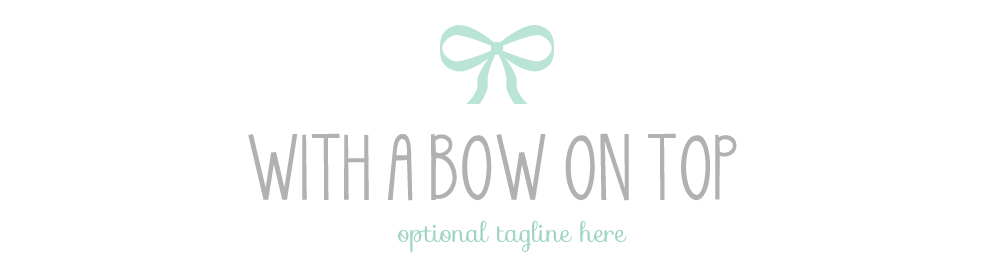
<style>
.page{position:relative;width:1000px;height:271px;background:#ffffff}
.page>*{position:absolute;margin:0}
.t1{font:74.8px "KGSkinnyLatte";color:#b2b1b1;text-transform:uppercase}
.t2{font:26.4px "Sofia-Regular";color:#a0d5c3}
</style>
<div class="page">
<p class="t1" style="left:248px;top:133px;width:489px;height:68px">WITH A BOW ON TOP</p>
<p class="t2" style="left:398px;top:220px;width:229px;height:32px">optional tagline here</p>
</div>
